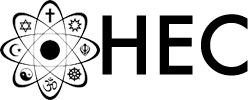
<style>
.page{position:relative;width:250px;height:100px;background:#ffffff}
.page>*{position:absolute;margin:0}
.t1{font:78px "Futura-Medium";color:#000000}
</style>
<div class="page">
<p class="t1" style="left:102px;top:14px;width:146px;height:62px">HEC</p>
</div>
